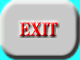
<style>
.page{position:relative;width:80px;height:60px;background:#c8c8c8}
.page>*{position:absolute;margin:0}
.t1{font:18px "MyungjoXB-HM"}
</style>
<div class="page">
<p class="t1" style="left:19px;top:22px;width:39px;height:14px">EXIT</p>
</div>
